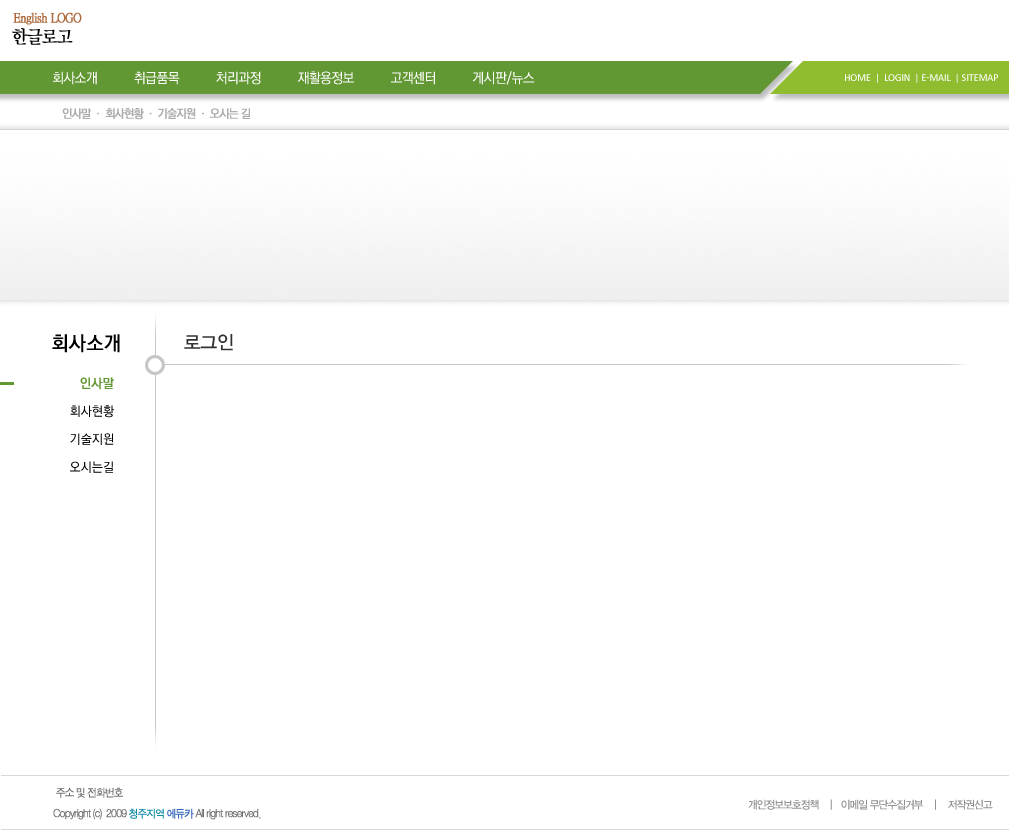
<style>
.page{position:relative;width:1009px;height:837px;background:#ffffff}
.page>*{position:absolute;margin:0}
.t1{font:13px "YMjO530";letter-spacing:-0.05em;color:#ad693c;font-weight:bold;scale:0.95 1}
.t2{font:18px "YMjO530";letter-spacing:-0.05em;color:#010101;font-weight:bold;scale:0.95 1}
.t3{font:14px "YGO530";letter-spacing:-0.05em;color:#ffffff;scale:0.95 1}
.t4{font:10.5px "Calibri";letter-spacing:-0.02em;color:#ffffff;text-transform:uppercase}
.t5{font:12px "YGO530";letter-spacing:-0.1em;color:#acacac;font-weight:bold;scale:0.95 1}
.t6{font:20px "YGO530";color:#000000;font-weight:bold;scale:0.95 1}
.t7{font:19px "YDIYGO330";color:#333333;scale:0.95 1}
.t8{font:13px/28px "YGO530";color:#000000;scale:0.95 1}
.t9{font:13px/28px "YGO530";color:#629834;font-weight:bold;scale:0.95 1}
.t10{font:11px "SandJg";letter-spacing:-0.08em;color:#707070;font-weight:bold;scale:0.95 1}
.t11{font:11px "SandJg";letter-spacing:-0.08em;color:#0e8aa5;font-weight:bold;scale:0.95 1}
.t12{font:11px "SandJg";letter-spacing:-0.08em;color:#2c61b6;font-weight:bold;scale:0.95 1}
.t13{font:11px "YDIYGO330";letter-spacing:-0.08em;color:#909090;scale:0.95 1}
</style>
<div class="page">
<p class="t1" style="left:13px;top:12px;width:69px;height:13px">English LOGO</p>
<p class="t2" style="left:12px;top:28px;width:61px;height:17px">한글로고</p>
<p class="t3" style="left:53px;top:71px;width:482px;height:14px">회사소개           취급품목           처리과정           재활용정보           고객센터           게시판/뉴스</p>
<p class="t4" style="left:845px;top:73px;width:153px;height:10px">home  |  Login  | e-mail  | sitemap</p>
<p class="t5" style="left:62px;top:108px;width:189px;height:12px">인사말 ㆍ 회사현황 ㆍ 기술지원 ㆍ 오시는 길</p>
<p class="t6" style="left:52px;top:334px;width:68px;height:19px">회사소개</p>
<p class="t7" style="left:184px;top:334px;width:49px;height:17px">로그인</p>
<p class="t8" style="left:70px;top:377px;width:44px;height:96px;text-align:right"><span class="t9">인사말<br></span>회사현황<br>기술지원<br>오시는길</p>
<p class="t10" style="left:56px;top:787px;width:67px;height:11px">주소 및 전화번호</p>
<p class="t10" style="left:53px;top:808px;width:208px;height:12px">Copyright (c)  2009 <span class="t11">청주지역 </span><span class="t12">에듀카 </span>All right reserved.</p>
<p class="t13" style="left:748px;top:799px;width:245px;height:11px">개인정보보호정책    |   이메일 무단수집거부    |    저작권신고</p>
</div>
